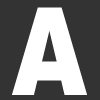
<style>
.page{position:relative;width:100px;height:100px;background:#333333}
.page>*{position:absolute;margin:0}
.t1{font:122.1px "Arial-Black";letter-spacing:-0.05em;color:#ffffff;scale:0.79 1}
</style>
<div class="page">
<p class="t1" style="left:12px;top:7px;width:75px;height:88px">A</p>
</div>
